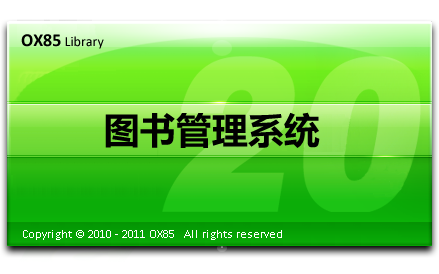
<style>
.page{position:relative;width:439px;height:274px}
.page>*{position:absolute;margin:0}
.t1{font:14px "Calibri";color:#000000}
.t2{font:18px "Calibri-Bold";color:#000000}
.t3{font:36px "MicrosoftYaHei-Bold";color:#000000}
.t4{font:12px "Calibri";color:#fefefe}
</style>
<div class="page">
<p class="t1" style="left:21px;top:34px;width:83px;height:15px"><span class="t2">OX85</span> Library</p>
<p class="t3" style="left:105px;top:112px;width:215px;height:36px">图书管理系统</p>
<p class="t4" style="left:23px;top:230px;width:259px;height:10px">Copyright © 2010 - 2011 OX85   All rights reserved</p>
</div>
